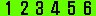
<style>
.page{position:relative;width:96px;height:16px;background:#65ff00}
.page>*{position:absolute;margin:0}
.t1{font:20px "Haettenschweiler";letter-spacing:0.16em;color:#000000}
.t2{font:20px "Haettenschweiler";color:#000000}
</style>
<div class="page">
<p class="t1" style="left:6px;top:1px;width:4px;height:14px">1</p>
<p class="t2" style="left:21px;top:1px;width:7px;height:14px">2</p>
<p class="t2" style="left:36px;top:1px;width:7px;height:14px">3</p>
<p class="t2" style="left:51px;top:1px;width:9px;height:14px">4</p>
<p class="t2" style="left:68px;top:1px;width:7px;height:14px">5</p>
<p class="t2" style="left:84px;top:1px;width:7px;height:14px">6</p>
</div>
